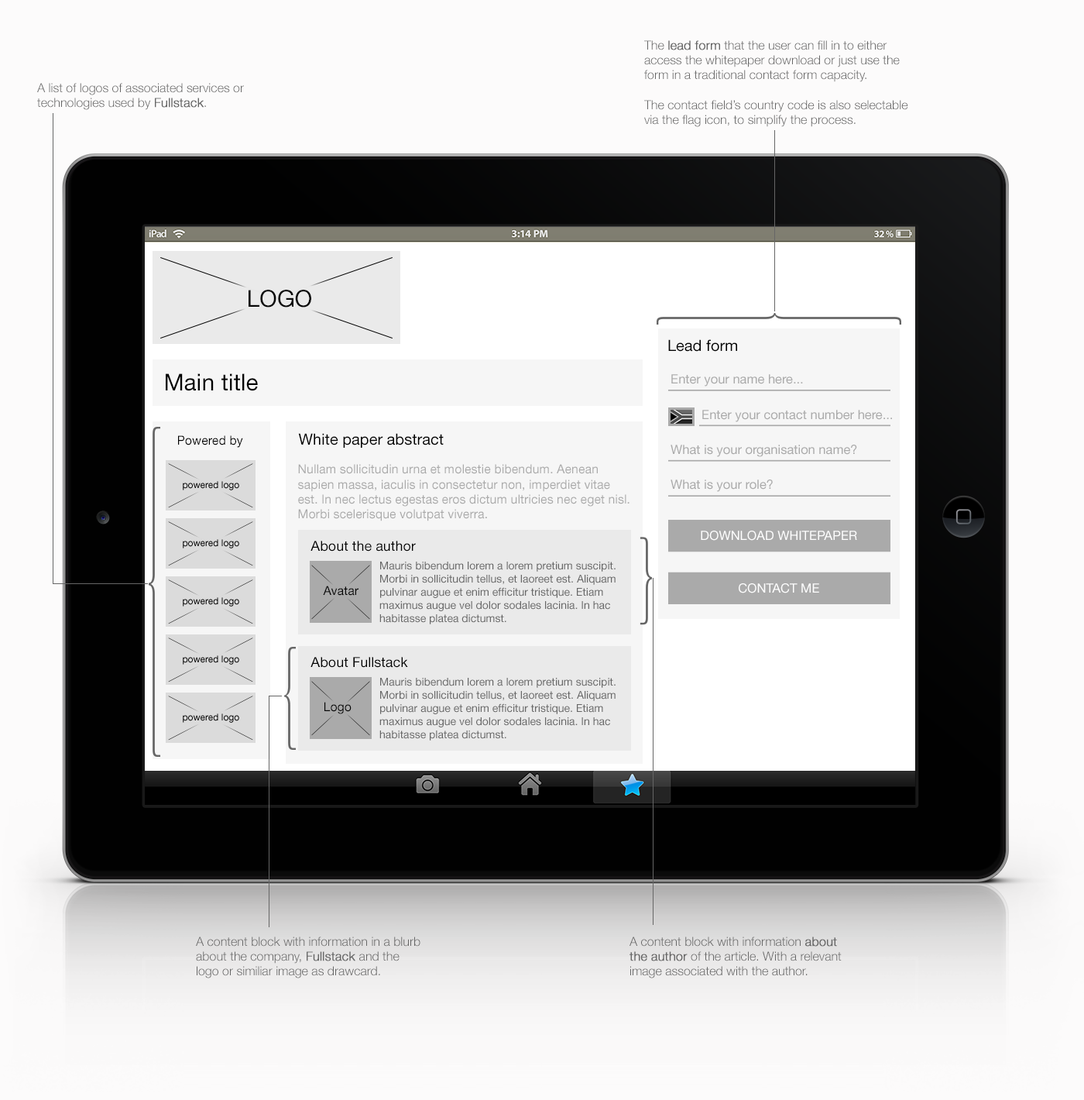
<style>
.page{position:relative;width:1084px;height:1100px;background:#fcfbfb}
.page>*{position:absolute;margin:0}
.t1{font:12.4px "HelveticaNeueLTStd-Lt";color:#666666}
.t2{font:12.4px "HelveticaNeueLTStd-Lt";color:#666666;font-weight:bold}
.t3{font:23.2px "HelveticaNeueLTStd-Roman";color:#000000}
.t4{font:15.5px "HelveticaNeueLTStd-Roman";color:#000000}
.t5{font:12.8px "HelveticaNeueLTStd-Roman";color:#aaaaaa}
.t6{font:12.4px "HelveticaNeueLTStd-Roman";color:#000000}
.t7{font:12.4px "HelveticaNeueLTStd-Roman";color:#aaaaaa}
.t8{font:12.8px "HelveticaNeueLTStd-Roman";color:#ffffff}
.t9{font:13.9px "HelveticaNeueLTStd-Roman";color:#000000}
.t10{font:10.8px "HelveticaNeueLTStd-Roman";color:#666666}
</style>
<div class="page">
<p class="t1" style="left:644px;top:40px;width:264px;height:87px">The <span class="t2">lead form</span> that the user can fill in to either access the whitepaper download or just use the form in a traditional contact form capacity.<br><br>The contact field’s country code is also selectable via the flag icon, to simplify the process.</p>
<p class="t1" style="left:37px;top:83px;width:207px;height:27px">A list of logos of associated services or technologies used by <span class="t2">Fullstack</span>.</p>
<p class="t3" style="left:249px;top:290px;width:62px;height:17px">LOGO</p>
<p class="t4" style="left:668px;top:339px;width:69px;height:13px">Lead form</p>
<p class="t3" style="left:166px;top:373px;width:92px;height:18px">Main title</p>
<p class="t5" style="left:671px;top:374px;width:132px;height:12px">Enter your name here...</p>
<p class="t5" style="left:702px;top:410px;width:190px;height:12px">Enter your contact number here...</p>
<p class="t6" style="left:178px;top:435px;width:65px;height:13px">Powered by</p>
<p class="t4" style="left:298px;top:433px;width:146px;height:15px">White paper abstract</p>
<p class="t5" style="left:671px;top:445px;width:186px;height:12px">What is your organisation name?</p>
<p class="t7" style="left:298px;top:464px;width:332px;height:57px">Nullam sollicitudin urna et molestie bibendum. Aenean sapien massa, iaculis in consectetur non, imperdiet vitae est. In nec lectus egestas eros dictum ultricies nec eget nisl. Morbi scelerisque volutpat viverra.</p>
<p class="t5" style="left:671px;top:479px;width:102px;height:13px">What is your role?</p>
<p class="t8" style="left:701px;top:531px;width:156px;height:10px">DOWNLOAD WHITEPAPER</p>
<p class="t9" style="left:311px;top:541px;width:105px;height:10px">About the author</p>
<p class="t10" style="left:379px;top:561px;width:237px;height:63px">Mauris bibendum lorem a lorem pretium suscipit. Morbi in sollicitudin tellus, et laoreet est. Aliquam pulvinar augue et enim efficitur tristique. Etiam maximus augue vel dolor sodales lacinia. In hac habitasse platea dictumst.</p>
<p class="t6" style="left:323px;top:586px;width:36px;height:10px">Avatar</p>
<p class="t8" style="left:739px;top:583px;width:80px;height:10px">CONTACT ME</p>
<p class="t9" style="left:311px;top:657px;width:97px;height:11px">About Fullstack</p>
<p class="t10" style="left:379px;top:678px;width:237px;height:62px">Mauris bibendum lorem a lorem pretium suscipit. Morbi in sollicitudin tellus, et laoreet est. Aliquam pulvinar augue et enim efficitur tristique. Etiam maximus augue vel dolor sodales lacinia. In hac habitasse platea dictumst.</p>
<p class="t6" style="left:325px;top:702px;width:27px;height:12px">Logo</p>
<p class="t1" style="left:196px;top:936px;width:225px;height:42px">A content block with information in a blurb about the company, <span class="t2">Fullstack </span>and the logo or similiar image as drawcard.</p>
<p class="t1" style="left:630px;top:936px;width:212px;height:42px">A content block with information <span class="t2">about the author</span> of the article. With a relevant image associated with the author.</p>
</div>
